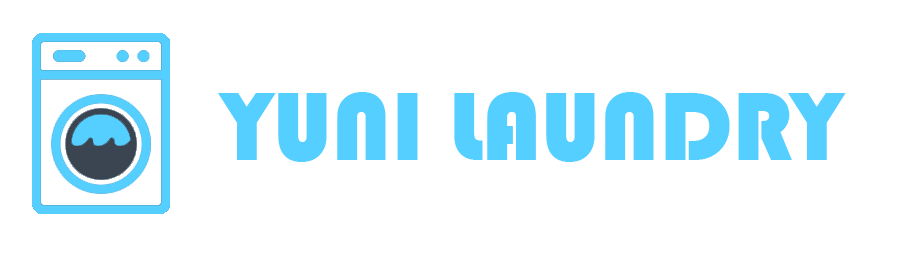
<style>
.page{position:relative;width:918px;height:263px;background:#ffffff}
.page>*{position:absolute;margin:0}
.t1{font:100px "Bauhaus93";color:#54cfff}
</style>
<div class="page">
<p class="t1" style="left:218px;top:92px;width:628px;height:70px">YUNI LAUNDRY</p>
</div>
